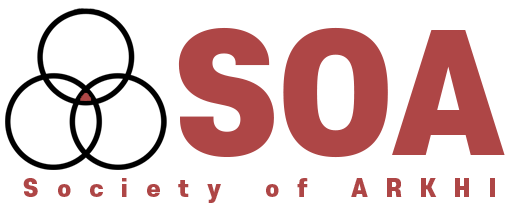
<style>
.page{position:relative;width:512px;height:220px;background:#ffffff}
.page>*{position:absolute;margin:0}
.t1{font:154.9px "S-CoreDream-9Black";color:#ae4646}
.t2{font:22.8px "S-CoreDream-9Black";letter-spacing:0.8em;color:#ae4646}
</style>
<div class="page">
<p class="t1" style="left:178px;top:27px;width:327px;height:131px">SOA</p>
<p class="t2" style="left:23px;top:178px;width:472px;height:25px">Society of ARKHI</p>
</div>
